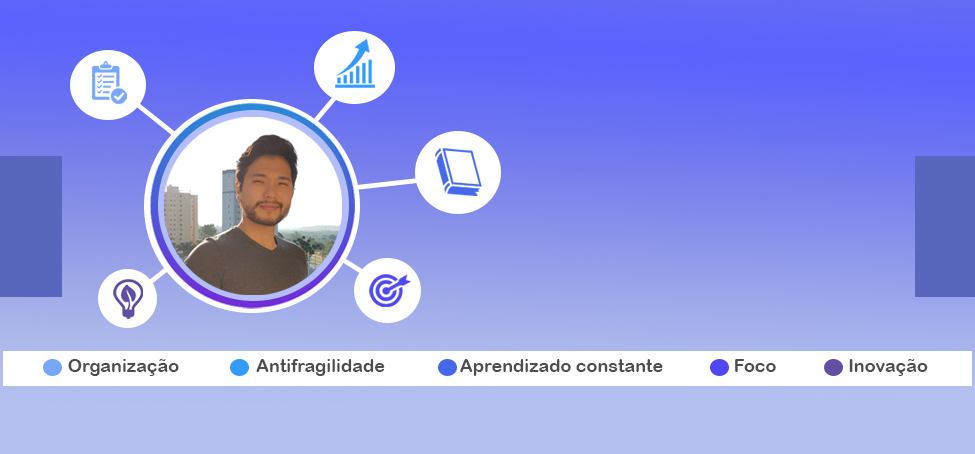
<style>
.page{position:relative;width:975px;height:454px}
.page>*{position:absolute;margin:0}
.t1{font:18px "ArialRoundedMTBold";color:#4e4c4c}
</style>
<div class="page">
<p class="t1" style="left:68px;top:359px;width:111px;height:17px">Organização</p>
<p class="t1" style="left:256px;top:359px;width:129px;height:17px">Antifragilidade</p>
<p class="t1" style="left:460px;top:359px;width:203px;height:17px">Aprendizado constante</p>
<p class="t1" style="left:735px;top:359px;width:41px;height:13px">Foco</p>
<p class="t1" style="left:849px;top:359px;width:79px;height:17px">Inovação</p>
</div>
